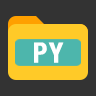
<style>
.page{position:relative;width:96px;height:96px;background:#333333}
.page>*{position:absolute;margin:0}
.t1{font:28px "HelveticaNeue-CondensedBold";letter-spacing:0.055em;color:#ffffff}
</style>
<div class="page">
<p class="t1" style="left:34px;top:42px;width:30px;height:21px">PY</p>
</div>
